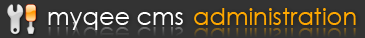
<style>
.page{position:relative;width:365px;height:38px;background:#333333}
.page>*{position:absolute;margin:0}
.t1{font:24px "CenturyGothic";color:#ffffff}
.t2{font:24px "CenturyGothic";color:#ffa800}
</style>
<div class="page">
<p class="t1" style="left:48px;top:12px;width:135px;height:18px">myqee cms</p>
<p class="t2" style="left:194px;top:8px;width:162px;height:17px">administration</p>
</div>
